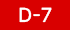
<style>
.page{position:relative;width:70px;height:30px;background:#d90000}
.page>*{position:absolute;margin:0}
.t1{font:20px "PretendardVariable-Medium";color:#ffffff}
</style>
<div class="page">
<p class="t1" style="left:19px;top:7px;width:33px;height:16px">D-7</p>
</div>
